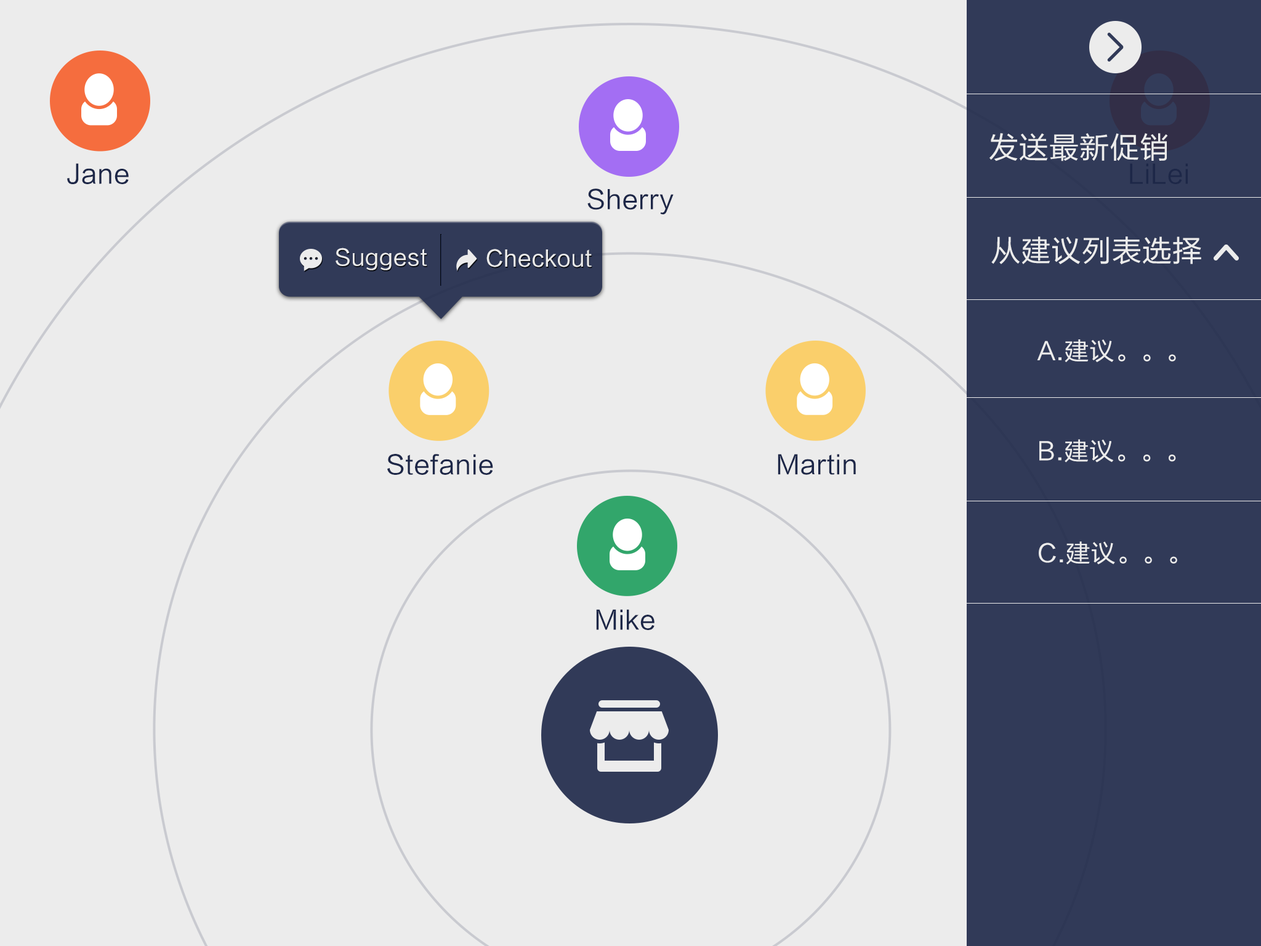
<style>
.page{position:relative;width:1261px;height:946px;background:#ececec}
.page>*{position:absolute;margin:0}
.t1{font:29.7px "FZLTHJW--GB1-0";letter-spacing:0.025em;color:#ececec}
.t2{font:25.9px "FZLTHJW--GB1-0";letter-spacing:0.025em;color:#1d2748}
.t3{font:22.1px "FZLTHJW--GB1-0";letter-spacing:0.025em;color:#ececec}
.t4{font:22.2px "FZLTHJW--GB1-0";letter-spacing:0.025em;color:#ececec}
.t5{font:24.6px "FZLTHJW--GB1-0";letter-spacing:0.025em;color:#ececec}
.t6{font:25.8px "FZLTHJW--GB1-0";letter-spacing:0.025em;color:#1d2748}
</style>
<div class="page">
<p class="t1" style="left:989px;top:133px;width:179px;height:28px">发送最新促销</p>
<p class="t2" style="left:67px;top:163px;width:62px;height:21px">Jane</p>
<p class="t2" style="left:1130px;top:163px;width:58px;height:21px">LiLei</p>
<p class="t2" style="left:587px;top:188px;width:87px;height:26px">Sherry</p>
<p class="t1" style="left:991px;top:236px;width:210px;height:29px">从建议列表选择</p>
<p class="t3" style="left:336px;top:248px;width:91px;height:22px">Suggest</p>
<p class="t4" style="left:486px;top:249px;width:106px;height:18px">Checkout</p>
<p class="t5" style="left:1037px;top:339px;width:139px;height:23px">A.建议。。。</p>
<p class="t5" style="left:1039px;top:439px;width:137px;height:23px">B.建议。。。</p>
<p class="t6" style="left:387px;top:454px;width:106px;height:21px">Stefanie</p>
<p class="t6" style="left:778px;top:454px;width:78px;height:21px">Martin</p>
<p class="t5" style="left:1039px;top:541px;width:138px;height:24px">C.建议。。。</p>
<p class="t6" style="left:596px;top:609px;width:58px;height:21px">Mike</p>
</div>
